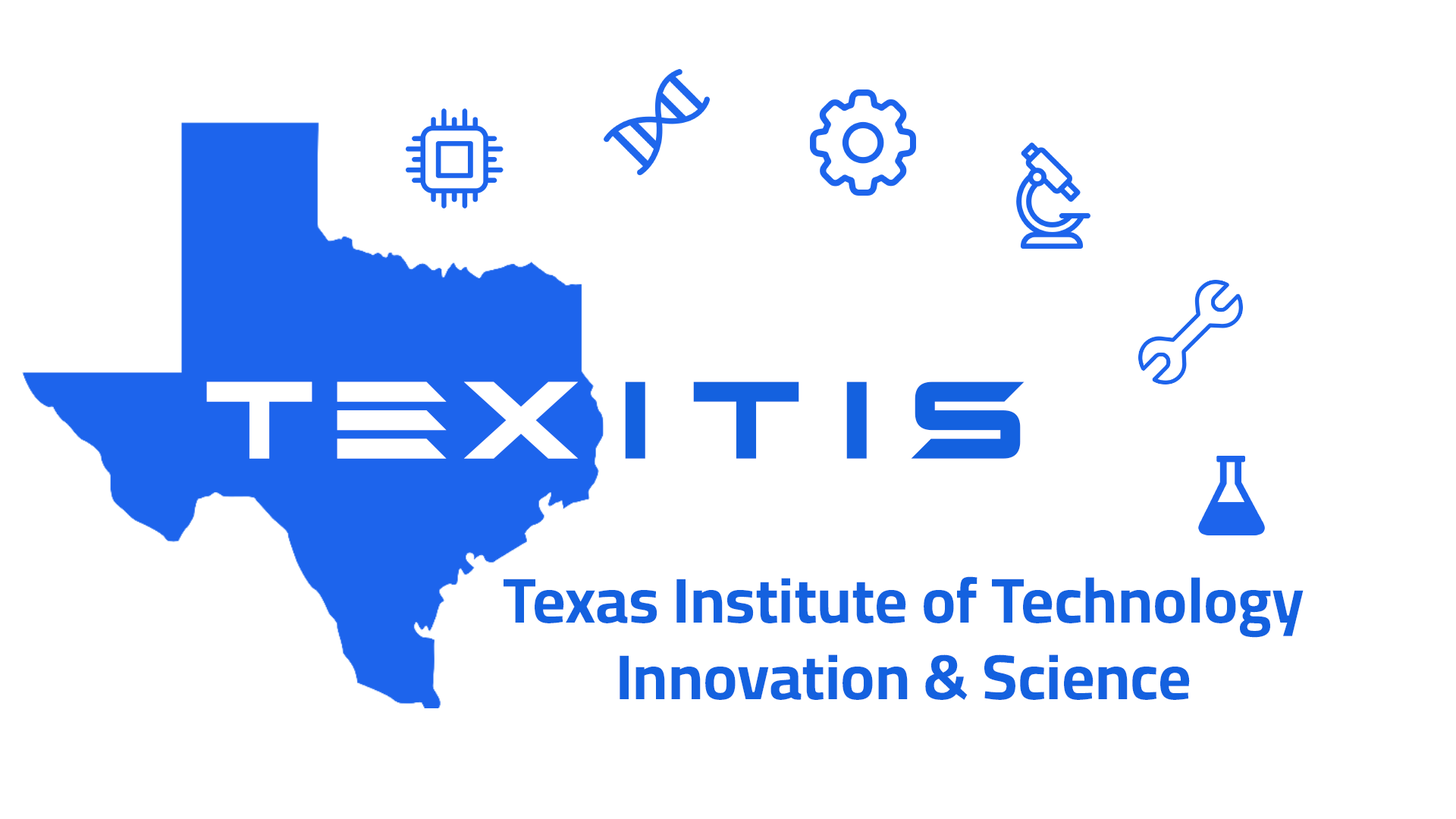
<style>
.page{position:relative;width:1456px;height:819px;background:#ffffff}
.page>*{position:absolute;margin:0}
.t1{font:113.7px "AlienMine";letter-spacing:0.15em;color:#ffffff}
.t2{font:113.7px "AlienMine";letter-spacing:0.35em;color:#1461df}
.t3{font:63.7px "Cairo-Bold";color:#1461df}
</style>
<div class="page">
<p class="t1" style="left:206px;top:381px;width:373px;height:78px">TEX</p>
<p class="t2" style="left:625px;top:381px;width:399px;height:78px">ITIS</p>
<p class="t3" style="left:504px;top:576px;width:800px;height:124px;text-align:center">Texas Institute of Technology<br>Innovation &amp; Science</p>
</div>
